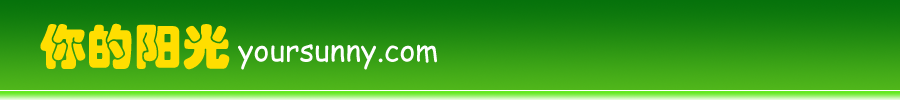
<style>
.page{position:relative;width:900px;height:100px}
.page>*{position:absolute;margin:0}
.t1{font:48px "STHupo";color:#ffde00}
.t2{font:30px "ComicSansMS";color:#ffffff}
</style>
<div class="page">
<p class="t1" style="left:40px;top:23px;width:190px;height:47px">你的阳光</p>
<p class="t2" style="left:238px;top:44px;width:199px;height:26px">yoursunny.com</p>
</div>
